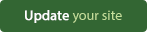
<style>
.page{position:relative;width:147px;height:32px;background:#336633}
.page>*{position:absolute;margin:0}
.t1{font:14px "MyriadPro-Regular";color:#c4df9b}
.t2{font:14px "MyriadPro-Regular";color:#ffffff;font-weight:bold}
</style>
<div class="page">
<p class="t1" style="left:25px;top:10px;width:97px;height:13px"><span class="t2">Update </span>your site</p>
</div>
